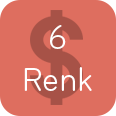
<style>
.page{position:relative;width:116px;height:116px;background:#de6e5f}
.page>*{position:absolute;margin:0}
.t1{font:35px "Bryant-RegularCondensed";color:#ffffff}
</style>
<div class="page">
<p class="t1" style="left:24px;top:25px;width:68px;height:66px;text-align:center">6<br>Renk</p>
</div>
